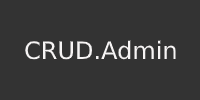
<style>
.page{position:relative;width:200px;height:100px;background:#333333}
.page>*{position:absolute;margin:0}
.t1{font:24px "DejaVuSans";color:#f7f5f5}
</style>
<div class="page">
<p class="t1" style="left:25px;top:40px;width:151px;height:20px">CRUD.Admin</p>
</div>
